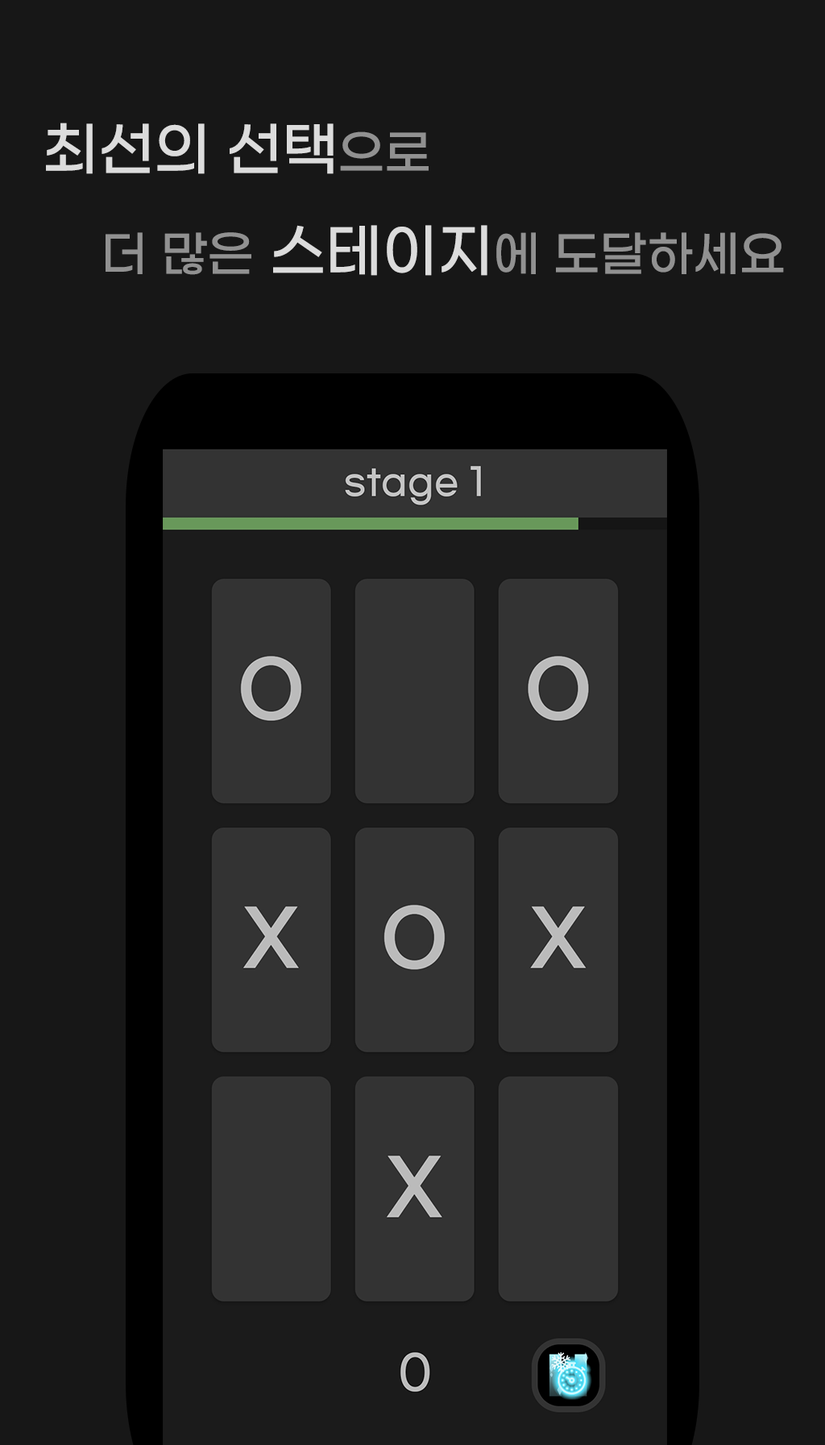
<style>
.page{position:relative;width:825px;height:1445px;background:#171717}
.page>*{position:absolute;margin:0}
.t1{font:48.4px "GmarketSansTTFMedium";color:#919191}
.t2{font:58px "GmarketSansTTFMedium";color:#dcdcdc}
</style>
<div class="page">
<p class="t1" style="left:46px;top:123px;width:738px;height:153px"><span class="t2">최선의 선택</span>으로<br>  더 많은 <span class="t2">스테이지</span>에 도달하세요</p>
</div>
